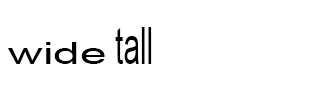
<style>
.page{position:relative;width:320px;height:96px;background:#ffffff}
.page>*{position:absolute;margin:0}
.t1{font:30px "ArialMT";color:#000000;scale:1.6 1}
.t2{font:51px "ArialMT";color:#000000;scale:0.59 1}
</style>
<div class="page">
<p class="t1" style="left:8px;top:27px;width:144px;height:37px">wide <span class="t2">tall</span></p>
</div>
